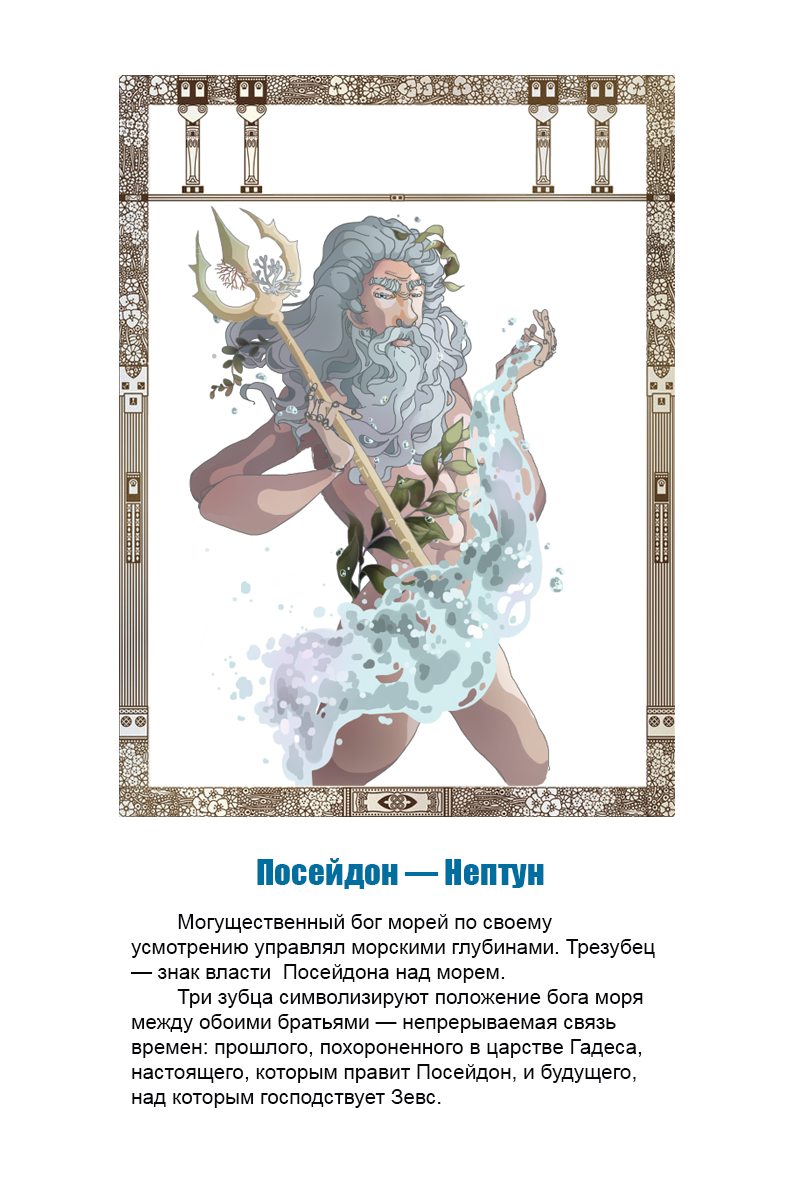
<style>
.page{position:relative;width:800px;height:1200px;background:#ffffff}
.page>*{position:absolute;margin:0}
.t1{font:33.3px "Impact";color:#006f9f}
.t2{font:20.8px "ArialMT";color:#07060b}
</style>
<div class="page">
<p class="t1" style="left:257px;top:858px;width:287px;height:31px">Посейдон — Нептун</p>
<p class="t2" style="left:130px;top:914px;width:525px;height:194px">Могущественный бог морей по своему <br>усмотрению управлял морскими глубинами. Трезубец <br>— знак власти  Посейдона над морем.<br>        Три зубца символизируют положение бога моря <br>между обоими братьями — непрерываемая связь <br>времен: прошлого, похороненного в царстве Гадеса, <br>настоящего, которым правит Посейдон, и будущего, <br>над которым господствует Зевс.</p>
</div>
